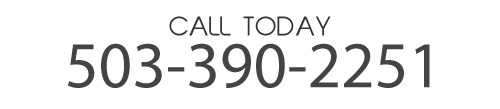
<style>
.page{position:relative;width:500px;height:109px;background:#ffffff}
.page>*{position:absolute;margin:0}
.t1{font:65.7px "MyriadPro-Regular";color:#454444}
</style>
<div class="page">
<p class="t1" style="left:67px;top:43px;width:363px;height:45px">503-390-2251</p>
</div>
